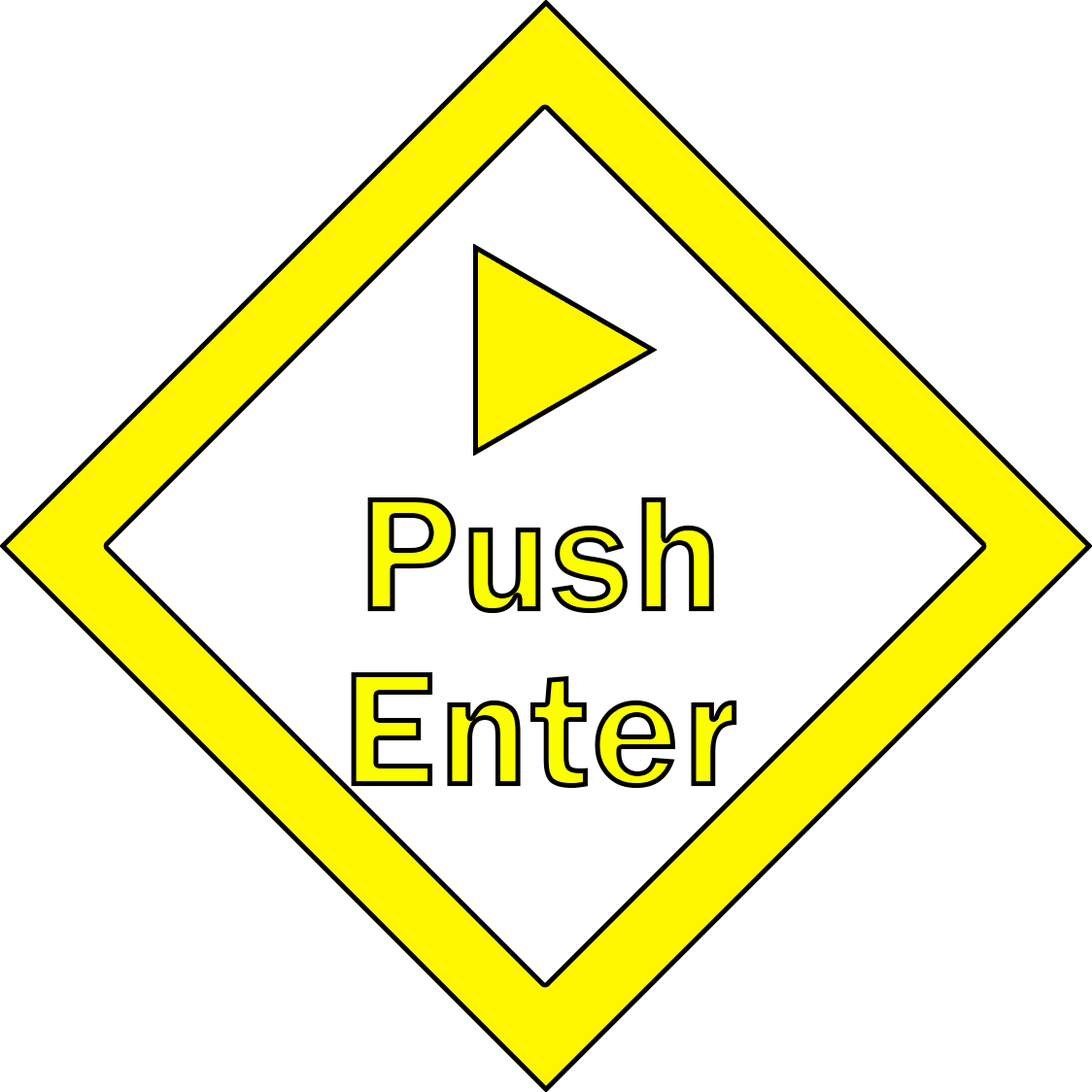
<style>
.page{position:relative;width:1092px;height:1092px;background:#ffffff}
.page>*{position:absolute;margin:0}
.t1{font:170px/87.4px "FranklinGothic-Demi"}
</style>
<div class="page">
<p class="t1" style="left:351px;top:497px;width:386px;height:291px;text-align:center">Push<br><br>Enter</p>
</div>
